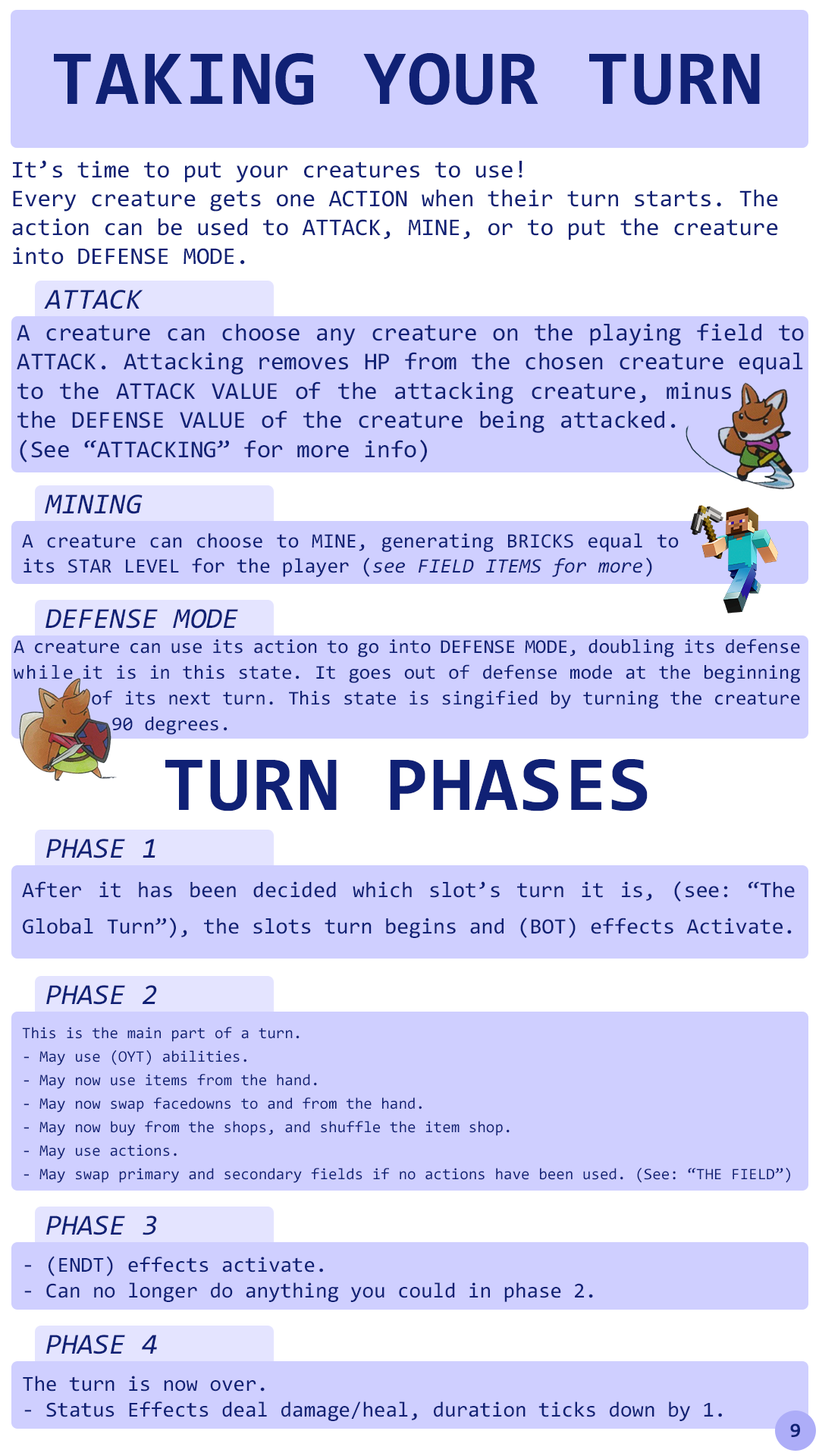
<style>
.page{position:relative;width:819px;height:1456px;background:#cfcfff}
.page>*{position:absolute;margin:0}
.t1{font:78.3px "Consolas-Bold";letter-spacing:0.02em;color:#102175}
.t2{font:24.1px "Consolas";color:#102175}
.t3{font:29.2px "Consolas-Italic";color:#102175}
.t4{font:24.3px "Consolas";color:#102175}
.t5{font:20.6px "Consolas";color:#102175}
.t6{font:20.6px "Consolas-Italic";color:#102175}
.t7{font:19.7px/25.8px "Consolas";color:#102175}
.t8{font:22px/36.4px "Consolas";color:#102175}
.t9{font:15.9px/23.5px "Consolas";color:#102175}
.t10{font:21.3px "Consolas";color:#102175}
.t11{font:20.5px "Consolas-Bold";letter-spacing:-0.06em;color:#102175}
</style>
<div class="page">
<p class="t1" style="left:54px;top:53px;width:706px;height:52px">TAKING YOUR TURN</p>
<p class="t2" style="left:12px;top:160px;width:766px;height:105px">It’s time to put your creatures to use!<br>Every creature gets one ACTION when their turn starts. The action can be used to ATTACK, MINE, or to put the creature into DEFENSE MODE.</p>
<p class="t3" style="left:44px;top:290px;width:99px;height:19px">ATTACK</p>
<p class="t4" style="left:17px;top:323px;width:787px;height:140px;text-align:justify">A creature can choose any creature on the playing field to ATTACK. Attacking removes HP from the chosen creature equal to the ATTACK VALUE of the attacking creature, minus the DEFENSE VALUE of the creature being attacked. (See “ATTACKING” for more info)</p>
<p class="t3" style="left:45px;top:494px;width:98px;height:20px">MINING</p>
<p class="t5" style="left:22px;top:533px;width:657px;height:44px;text-align:justify">A creature can choose to MINE, generating BRICKS equal to its STAR LEVEL for the player (<span class="t6">see FIELD ITEMS for more</span>)</p>
<p class="t3" style="left:45px;top:609px;width:193px;height:20px">DEFENSE MODE</p>
<p class="t7" style="left:14px;top:639px;width:786px;height:96px;text-align:justify">A creature can use its action to go into DEFENSE MODE, doubling its defense while it is in this state. It goes out of defense mode at the beginning of its next turn. This state is singified by turning the creature 90 degrees.</p>
<p class="t1" style="left:165px;top:759px;width:483px;height:52px">TURN PHASES</p>
<p class="t3" style="left:46px;top:839px;width:109px;height:19px">PHASE 1</p>
<p class="t8" style="left:22px;top:881px;width:773px;height:57px;text-align:justify">After it has been decided which slot’s turn it is, (see: “The Global Turn”), the slots turn begins and (BOT) effects Activate.</p>
<p class="t3" style="left:46px;top:985px;width:111px;height:20px">PHASE 2</p>
<p class="t9" style="left:22px;top:1027px;width:768px;height:156px;text-align:justify">This is the main part of a turn.<br>- May use (OYT) abilities.<br>- May now use items from the hand.<br>- May now swap facedowns to and from the hand.<br>- May now buy from the shops, and shuffle the item shop.<br>- May use actions.<br>- May swap primary and secondary fields if no actions have been used. (See: “THE FIELD”)</p>
<p class="t3" style="left:46px;top:1216px;width:111px;height:19px">PHASE 3</p>
<p class="t10" style="left:24px;top:1256px;width:569px;height:46px;text-align:justify">- (ENDT) effects activate.<br>- Can no longer do anything you could in phase 2.</p>
<p class="t3" style="left:46px;top:1335px;width:111px;height:19px">PHASE 4</p>
<p class="t10" style="left:23px;top:1376px;width:699px;height:45px;text-align:justify">The turn is now over.<br>- Status Effects deal damage/heal, duration ticks down by 1.</p>
<p class="t11" style="left:790px;top:1423px;width:10px;height:14px">9</p>
</div>
